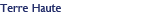
<style>
.page{position:relative;width:160px;height:15px;background:#ffffff}
.page>*{position:absolute;margin:0}
.t1{font:12px "GillSansMT";color:#242e6a}
</style>
<div class="page">
<p class="t1" style="left:0px;top:4px;width:61px;height:8px">Terre Haute</p>
</div>
